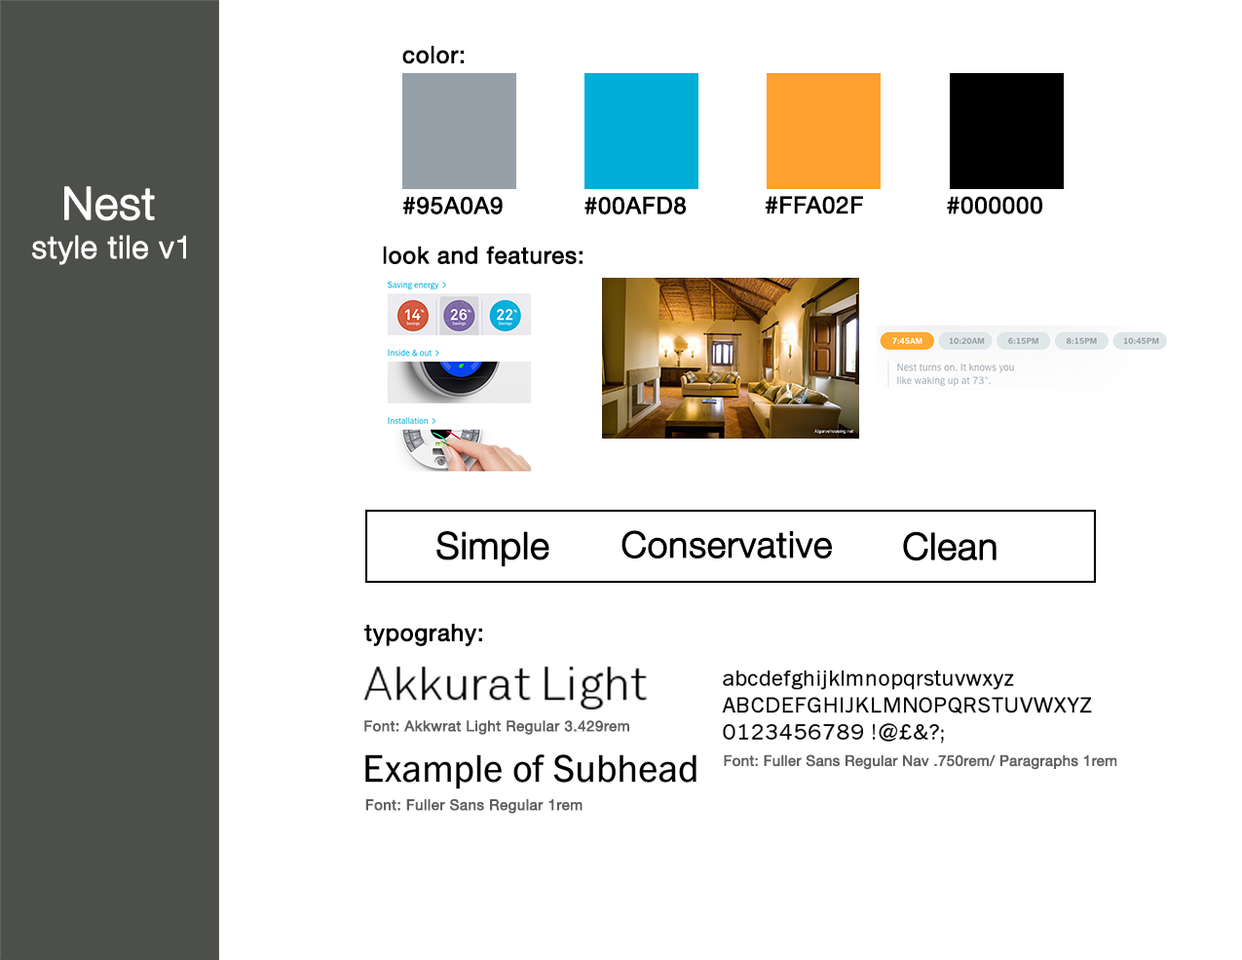
<style>
.page{position:relative;width:1242px;height:960px;background:#ffffff}
.page>*{position:absolute;margin:0}
.t1{font:23.4px "HelveticaNeue";letter-spacing:0.01em;color:#000000;font-weight:bold}
.t2{font:44.8px "HelveticaNeue-Light";color:#ffffff;font-weight:bold}
.t3{font:31.2px "HelveticaNeue-Light";letter-spacing:0.01em;color:#ffffff;font-weight:bold}
.t4{font:37px "HelveticaNeue-Light";color:#000000;font-weight:bold}
.t5{font:36.1px "HelveticaNeue-Light";color:#000000;font-weight:bold}
.t6{font:14.6px "HelveticaNeue";letter-spacing:0.01em;color:#5f605e;font-weight:bold}
.t7{font:14.6px "HelveticaNeue";color:#5f605e;font-weight:bold}
</style>
<div class="page">
<p class="t1" style="left:402px;top:46px;width:63px;height:18px">color:</p>
<p class="t2" style="left:64px;top:186px;width:91px;height:35px">Nest</p>
<p class="t1" style="left:402px;top:196px;width:101px;height:18px">#95A0A9</p>
<p class="t1" style="left:585px;top:196px;width:102px;height:18px">#00AFD8</p>
<p class="t1" style="left:765px;top:196px;width:98px;height:18px">#FFA02F</p>
<p class="t1" style="left:947px;top:196px;width:96px;height:18px">#000000</p>
<p class="t3" style="left:32px;top:235px;width:154px;height:30px">style tile v1</p>
<p class="t1" style="left:383px;top:246px;width:200px;height:18px">look and features:</p>
<p class="t4" style="left:437px;top:531px;width:113px;height:36px">Simple</p>
<p class="t5" style="left:622px;top:530px;width:210px;height:28px">Conservative</p>
<p class="t4" style="left:903px;top:531px;width:94px;height:30px">Clean</p>
<p class="t1" style="left:364px;top:624px;width:118px;height:22px">typograhy:</p>
<p class="t6" style="left:364px;top:720px;width:265px;height:15px">Font: Akkwrat Light Regular 3.429rem</p>
<p class="t7" style="left:724px;top:754px;width:394px;height:16px">Font: Fuller Sans Regular Nav .750rem/ Paragraphs 1rem</p>
<p class="t6" style="left:365px;top:798px;width:218px;height:16px">Font: Fuller Sans Regular 1rem</p>
</div>
